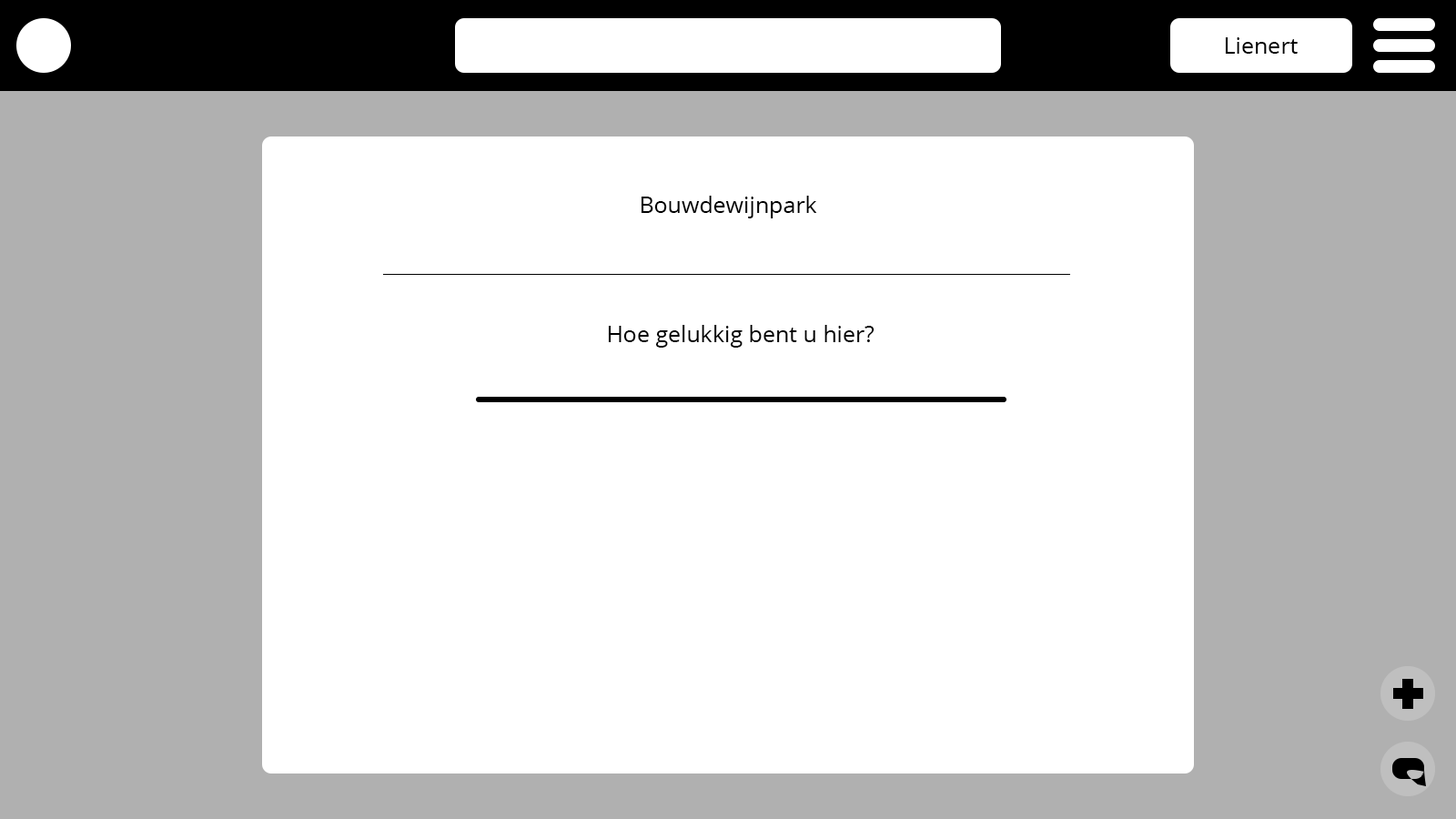
<style>
.page{position:relative;width:1456px;height:819px;background:#ffffff}
.page>*{position:absolute;margin:0}
.t1{font:22.7px "OpenSans";color:#000000}
</style>
<div class="page">
<p class="t1" style="left:641px;top:196px;width:176px;height:22px">Bouwdewijnpark</p>
<p class="t1" style="left:608px;top:325px;width:266px;height:23px">Hoe gelukkig bent u hier?</p>
</div>
